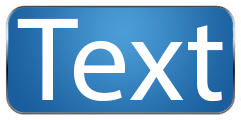
<style>
.page{position:relative;width:241px;height:120px;background:#ffffff}
.page>*{position:absolute;margin:0}
.t1{font:120px "MyriadPro-Regular";color:#ffffff}
</style>
<div class="page">
<p class="t1" style="left:17px;top:18px;width:206px;height:84px">Text</p>
</div>
